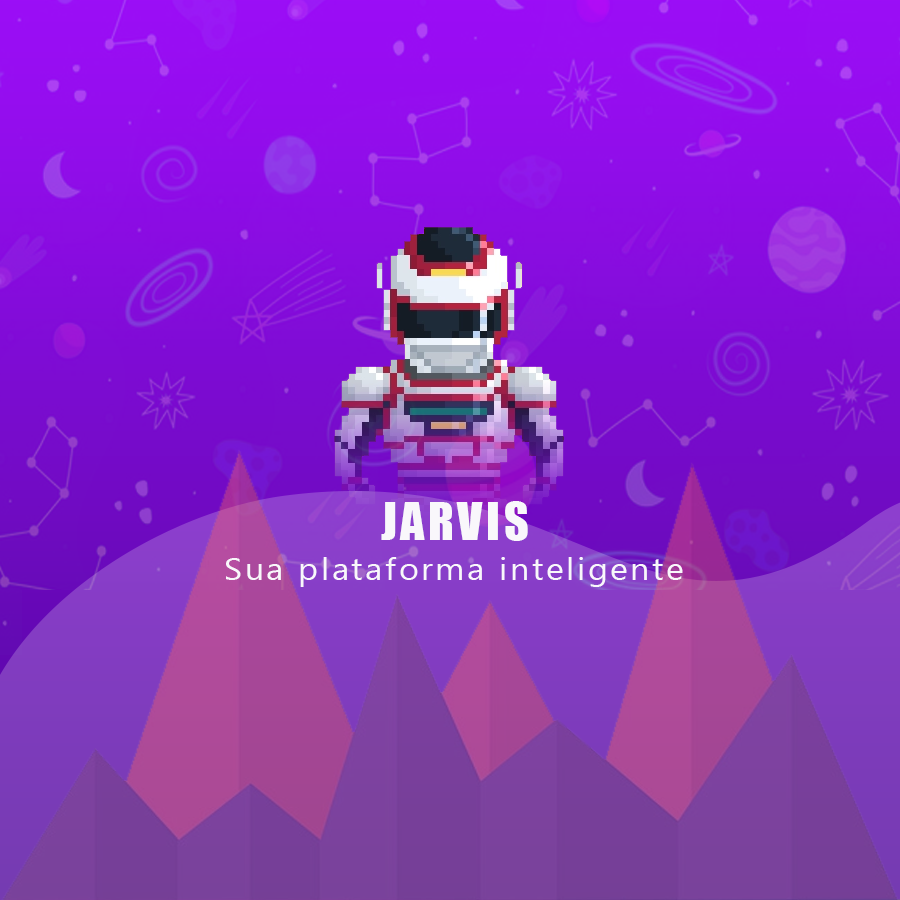
<style>
.page{position:relative;width:900px;height:900px}
.page>*{position:absolute;margin:0}
.t1{font:48px "Impact";letter-spacing:0.075em;color:#f9f7fb}
.t2{font:31.3px "SegoeUISymbol";letter-spacing:0.075em;color:#f9f7fb;scale:1.09 1}
</style>
<div class="page">
<p class="t1" style="left:381px;top:501px;width:147px;height:40px">JARVIS</p>
<p class="t2" style="left:226px;top:557px;width:457px;height:30px">Sua plataforma inteligente</p>
</div>
